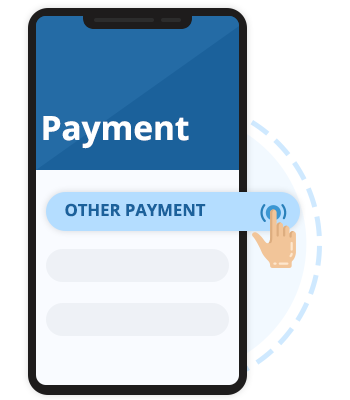
<style>
.page{position:relative;width:350px;height:400px;background:#ffffff}
.page>*{position:absolute;margin:0}
.t1{font:33.3px "OpenSans-Bold";color:#ffffff}
.t2{font:16.7px "OpenSans-Bold";color:#1b619b;text-transform:uppercase}
</style>
<div class="page">
<p class="t1" style="left:43px;top:116px;width:146px;height:33px">Payment</p>
<p class="t2" style="left:65px;top:203px;width:141px;height:14px">Other Payment</p>
</div>
